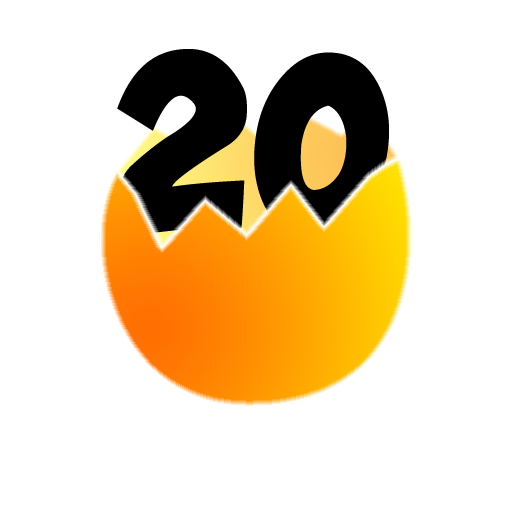
<style>
.page{position:relative;width:512px;height:512px;background:#ffffff}
.page>*{position:absolute;margin:0}
.t1{font:220px "KaBlam";letter-spacing:0.1em;color:#000000}
</style>
<div class="page">
<p class="t1" style="left:116px;top:49px;width:273px;height:190px">20</p>
</div>
